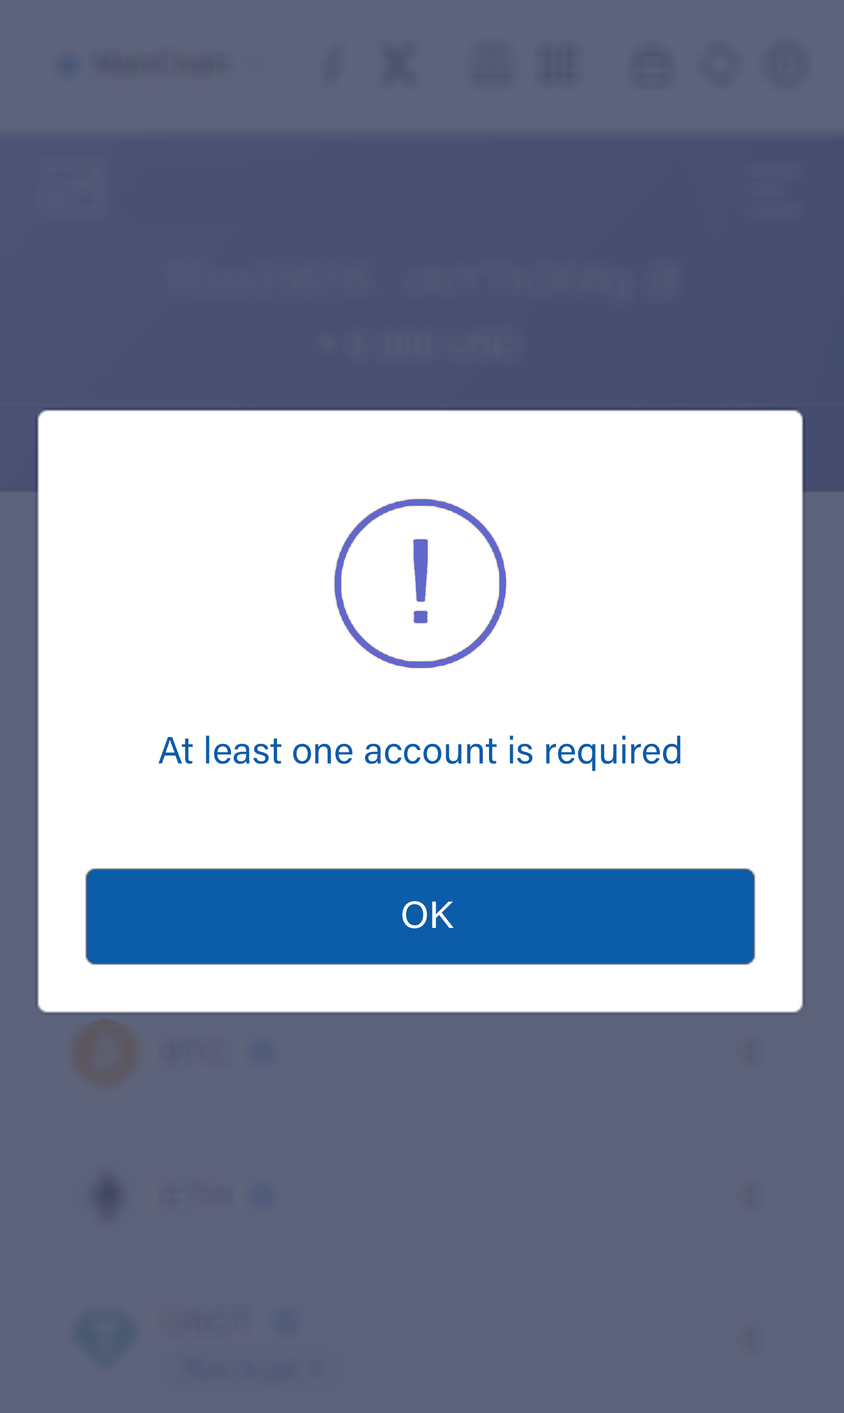
<style>
.page{position:relative;width:844px;height:1413px;background:#ffffff}
.page>*{position:absolute;margin:0}
.t1{font:38px "AcuminConcept-Regular";color:#0b5ca9;font-style:italic}
.t2{font:38px "AcuminConcept-Regular";color:#ffffff;font-style:italic}
</style>
<div class="page">
<p class="t1" style="left:158px;top:736px;width:522px;height:35px">At least one account is required</p>
<p class="t2" style="left:402px;top:901px;width:52px;height:28px">OK</p>
</div>
